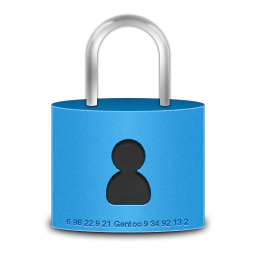
<style>
.page{position:relative;width:256px;height:256px;background:#ffffff}
.page>*{position:absolute;margin:0}
.t1{font:8px "Helvetica-Bold";color:#0c64a7}
</style>
<div class="page">
<p class="t1" style="left:66px;top:218px;width:123px;height:9px">6 98 22 9 21 Gentoo 9 34 92 13 2</p>
</div>
